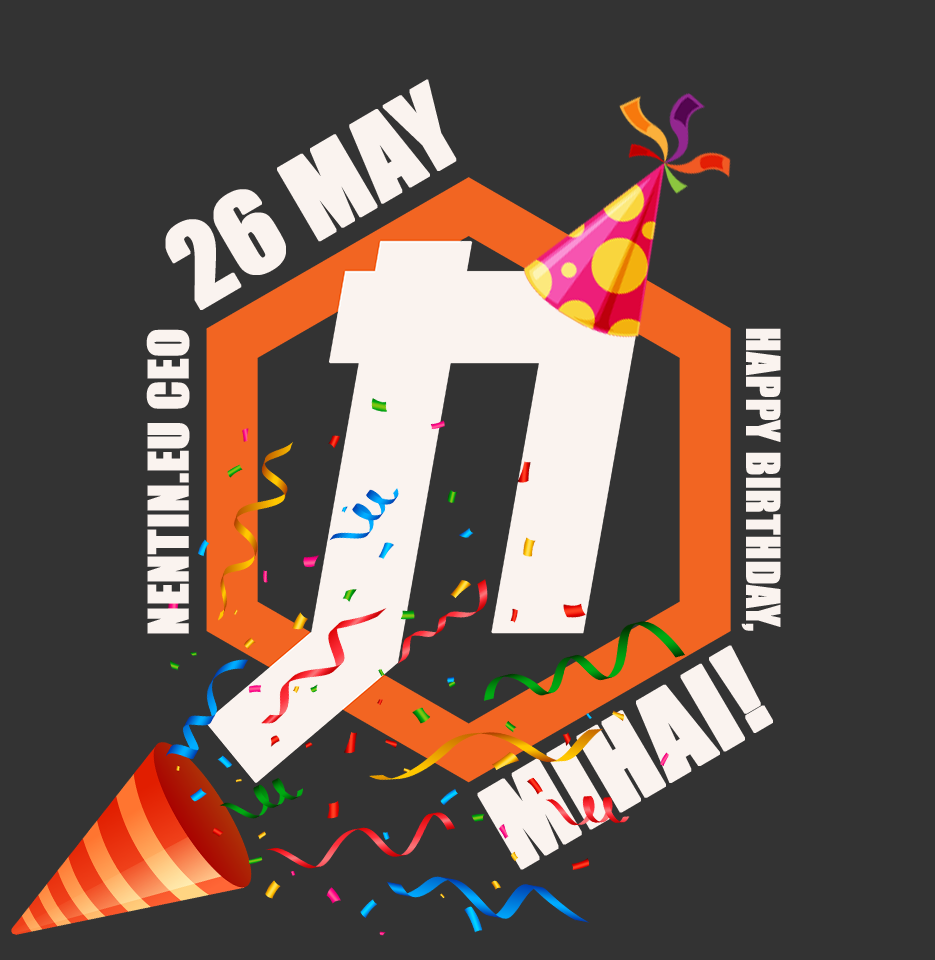
<style>
.page{position:relative;width:935px;height:960px;background:#333333}
.page>*{position:absolute;margin:0}
.t1{font:104.3px "Impact";color:#faf3ef;text-transform:uppercase;font-weight:bold}
.t2{font:51.3px "Impact";color:#faf3ef;text-transform:uppercase;font-weight:bold}
.t3{font:43.1px "Impact";color:#faf3ef;text-transform:uppercase;font-weight:bold}
.t4{font:108px "Impact";color:#faf3ef;text-transform:uppercase;font-weight:bold}
</style>
<div class="page">
<p class="t1" style="left:165px;top:79px;width:292px;height:231px;rotate:-30deg">26 may</p>
<p class="t2" style="left:146px;top:329px;width:44px;height:305px;rotate:-90deg">nentin.eu ceo</p>
<p class="t3" style="left:741px;top:328px;width:40px;height:303px;rotate:90deg">happy birthday,</p>
<p class="t4" style="left:477px;top:645px;width:296px;height:225px;rotate:-30deg">mihai!</p>
</div>
